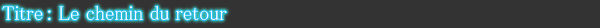
<style>
.page{position:relative;width:600px;height:28px;background:#333333}
.page>*{position:absolute;margin:0}
.t1{font:20px "MS-PMincho";color:#ffffff}
</style>
<div class="page">
<p class="t1" style="left:2px;top:5px;width:225px;height:16px">Titre : Le chemin du retour</p>
</div>
